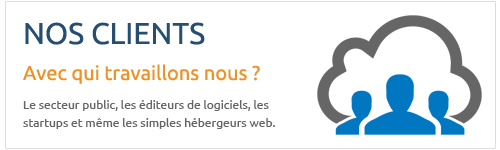
<style>
.page{position:relative;width:500px;height:150px;background:#ffffff}
.page>*{position:absolute;margin:0}
.t1{font:20px/18px "Ubuntu";color:#ee9126}
.t2{font:30px/18px "Ubuntu";color:#264e72}
.t3{font:12px/18px "Ubuntu";color:#666666}
</style>
<div class="page">
<p class="t1" style="left:23px;top:22px;width:237px;height:62px"><span class="t2">NOS CLIENTS<br><br></span>Avec qui travaillons nous ?</p>
<p class="t3" style="left:23px;top:100px;width:252px;height:29px">Le secteur public, les éditeurs de logiciels, les startups et même les simples hébergeurs web.</p>
</div>
